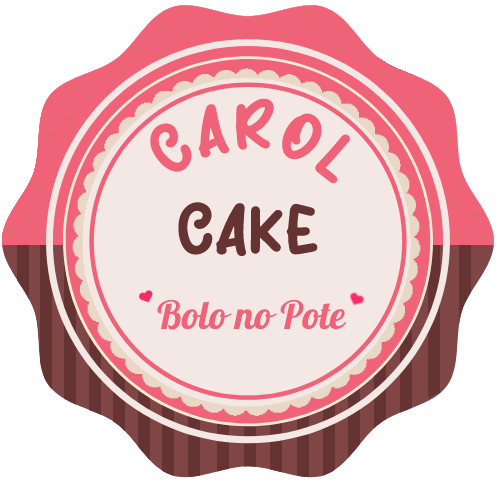
<style>
.page{position:relative;width:504px;height:491px;background:#f4e8e4}
.page>*{position:absolute;margin:0}
.t1{font:68px "Coffee-Mood";color:#f06278}
.t2{font:70px "Coffee-Mood";color:#653332}
.t3{font:39px "Pattaya-Regular";color:#f06278}
</style>
<div class="page">
<p class="t1" style="left:147px;top:98px;width:204px;height:86px;rotate:19deg">CAROL</p>
<p class="t2" style="left:177px;top:198px;width:141px;height:60px">CAKE</p>
<p class="t3" style="left:157px;top:299px;width:190px;height:31px">Bolo no Pote</p>
</div>
